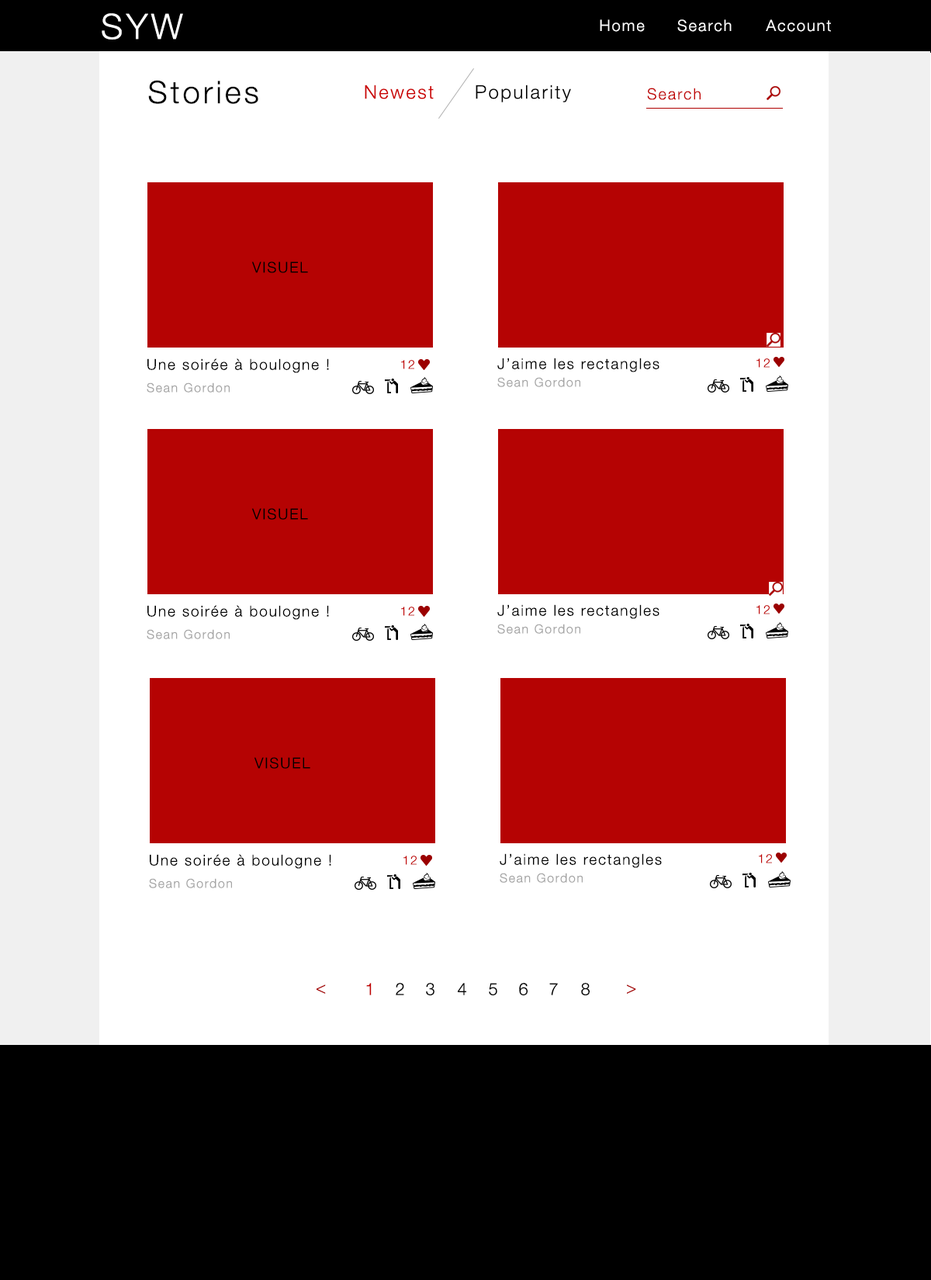
<style>
.page{position:relative;width:931px;height:1280px;background:#ffffff}
.page>*{position:absolute;margin:0}
.t1{font:34.9px "HelveticaNeue-Light";letter-spacing:0.1em;color:#ffffff}
.t2{font:15.5px "HelveticaNeue-Light";letter-spacing:0.1em;color:#ffffff}
.t3{font:31px "HelveticaNeue-Light";letter-spacing:0.1em;color:#000000}
.t4{font:18.6px "HelveticaNeue-Light";letter-spacing:0.1em;color:#cb0000}
.t5{font:18.6px "HelveticaNeue-Light";letter-spacing:0.1em;color:#000000}
.t6{font:15.6px "HelveticaNeue-Light";letter-spacing:0.1em;color:#c10404}
.t7{font:14.8px "HelveticaNeue-Light";letter-spacing:0.1em;color:#000000}
.t8{font:14.7px "HelveticaNeue-Light";letter-spacing:0.1em;color:#000000}
.t9{font:12.4px "HelveticaNeue-Light";letter-spacing:0.1em;color:#c10404}
.t10{font:12.4px "HelveticaNeue-Light";letter-spacing:0.1em;color:#a5a5a5}
.t11{font:17.1px "HelveticaNeue-Light";letter-spacing:0.1em;color:#a80303}
.t12{font:17.1px "HelveticaNeue-Light";letter-spacing:0.1em;color:#c00000}
.t13{font:17.1px "HelveticaNeue-Light";letter-spacing:0.1em;color:#000000}
</style>
<div class="page">
<p class="t1" style="left:102px;top:13px;width:81px;height:27px">SYW</p>
<p class="t2" style="left:600px;top:19px;width:45px;height:13px">Home</p>
<p class="t2" style="left:677px;top:19px;width:55px;height:13px">Search</p>
<p class="t2" style="left:766px;top:19px;width:65px;height:13px">Account</p>
<p class="t3" style="left:148px;top:80px;width:110px;height:24px">Stories</p>
<p class="t4" style="left:365px;top:85px;width:69px;height:14px">Newest</p>
<p class="t5" style="left:476px;top:85px;width:95px;height:17px">Popularity</p>
<p class="t6" style="left:647px;top:88px;width:54px;height:12px">Search</p>
<p class="t7" style="left:251px;top:262px;width:57px;height:11px">VISUEL</p>
<p class="t8" style="left:147px;top:359px;width:182px;height:14px">Une soirée à boulogne !</p>
<p class="t9" style="left:401px;top:360px;width:13px;height:9px">12</p>
<p class="t8" style="left:497px;top:358px;width:163px;height:14px">J’aime les rectangles</p>
<p class="t9" style="left:757px;top:359px;width:13px;height:9px">12</p>
<p class="t10" style="left:497px;top:377px;width:83px;height:10px">Sean Gordon</p>
<p class="t10" style="left:147px;top:383px;width:83px;height:10px">Sean Gordon</p>
<p class="t7" style="left:251px;top:508px;width:57px;height:12px">VISUEL</p>
<p class="t8" style="left:147px;top:605px;width:182px;height:15px">Une soirée à boulogne !</p>
<p class="t8" style="left:497px;top:605px;width:163px;height:14px">J’aime les rectangles</p>
<p class="t9" style="left:757px;top:605px;width:13px;height:10px">12</p>
<p class="t9" style="left:401px;top:607px;width:13px;height:9px">12</p>
<p class="t10" style="left:147px;top:629px;width:83px;height:10px">Sean Gordon</p>
<p class="t10" style="left:497px;top:624px;width:83px;height:10px">Sean Gordon</p>
<p class="t7" style="left:254px;top:757px;width:56px;height:12px">VISUEL</p>
<p class="t8" style="left:150px;top:854px;width:181px;height:15px">Une soirée à boulogne !</p>
<p class="t9" style="left:404px;top:856px;width:13px;height:9px">12</p>
<p class="t8" style="left:500px;top:854px;width:162px;height:14px">J’aime les rectangles</p>
<p class="t9" style="left:759px;top:854px;width:13px;height:10px">12</p>
<p class="t10" style="left:149px;top:878px;width:83px;height:11px">Sean Gordon</p>
<p class="t10" style="left:500px;top:873px;width:83px;height:10px">Sean Gordon</p>
<p class="t11" style="left:317px;top:985px;width:9px;height:9px">&lt;</p>
<p class="t12" style="left:366px;top:983px;width:6px;height:13px">1</p>
<p class="t13" style="left:396px;top:983px;width:8px;height:13px">2</p>
<p class="t13" style="left:426px;top:983px;width:9px;height:13px">3</p>
<p class="t13" style="left:458px;top:983px;width:8px;height:13px">4</p>
<p class="t13" style="left:489px;top:983px;width:8px;height:13px">5</p>
<p class="t13" style="left:519px;top:983px;width:9px;height:13px">6</p>
<p class="t13" style="left:549px;top:983px;width:9px;height:13px">7</p>
<p class="t13" style="left:581px;top:983px;width:9px;height:13px">8</p>
<p class="t11" style="left:627px;top:985px;width:9px;height:9px">&gt;</p>
</div>
